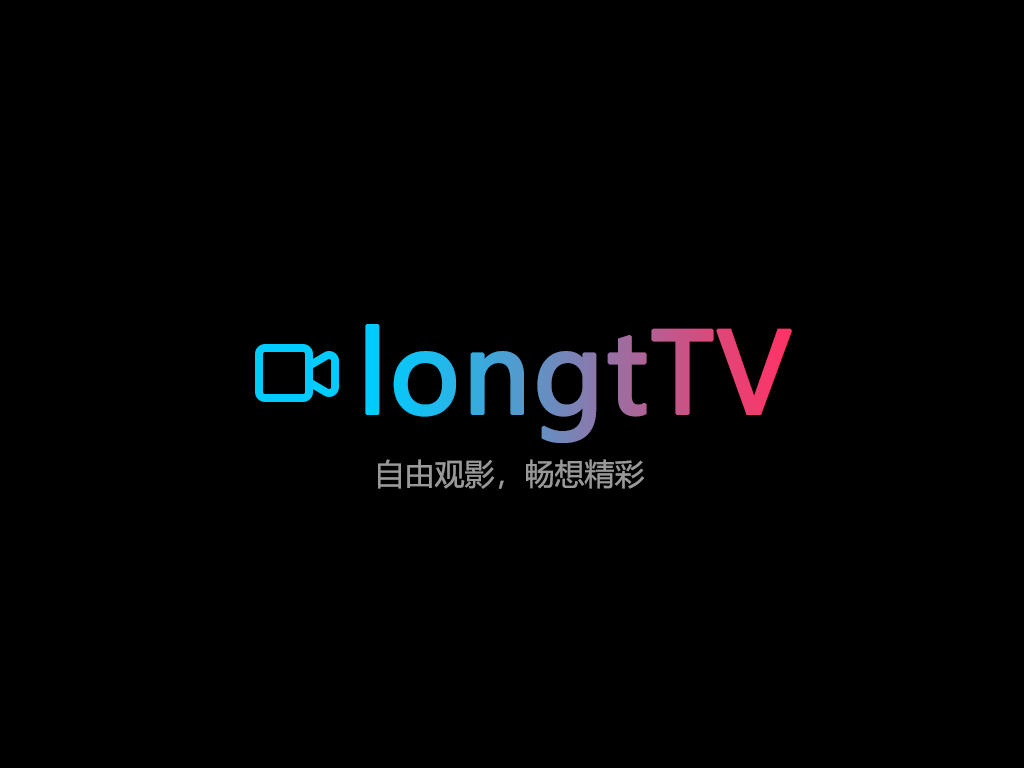
<style>
.page{position:relative;width:1024px;height:768px;background:#000000}
.page>*{position:absolute;margin:0}
.t1{font:110px "MicrosoftYaHei";font-weight:bold}
.t2{font:30px "MicrosoftYaHei";color:#999999}
</style>
<div class="page">
<p class="t1" style="left:365px;top:324px;width:427px;height:119px">longtTV</p>
<p class="t2" style="left:378px;top:459px;width:266px;height:30px">自由观影，畅想精彩</p>
</div>
